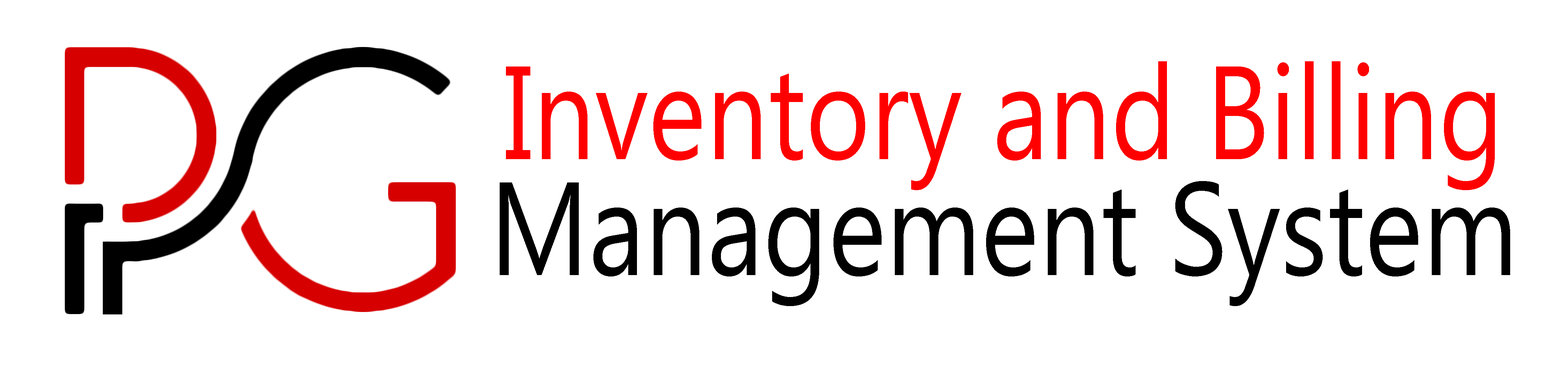
<style>
.page{position:relative;width:1568px;height:367px;background:#ffffff}
.page>*{position:absolute;margin:0}
.t1{font:132.4px/116.1px "Gadugi";color:#ff0000;scale:0.83 1}
.t2{font:132.4px/116.1px "Gadugi";color:#000000;scale:0.83 1}
</style>
<div class="page">
<p class="t1" style="left:500px;top:61px;width:1010px;height:245px;text-align:center">Inventory and Billing<br><span class="t2">Management System</span></p>
</div>
